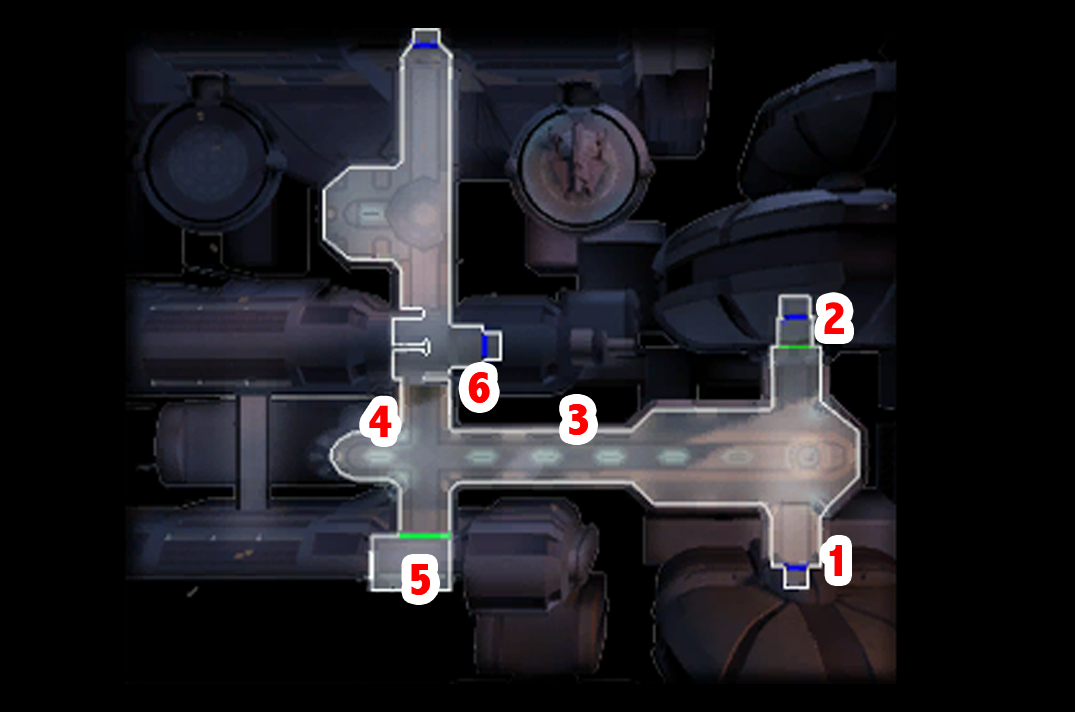
<style>
.page{position:relative;width:1075px;height:712px;background:#000000}
.page>*{position:absolute;margin:0}
.t1{font:48px "AbadiMT-CondensedExtraBold";color:#ff0000}
</style>
<div class="page">
<p class="t1" style="left:824px;top:302px;width:20px;height:32px">2</p>
<p class="t1" style="left:468px;top:372px;width:22px;height:31px">6</p>
<p class="t1" style="left:369px;top:405px;width:23px;height:32px">4</p>
<p class="t1" style="left:569px;top:404px;width:19px;height:31px">3</p>
<p class="t1" style="left:829px;top:545px;width:13px;height:31px">1</p>
<p class="t1" style="left:411px;top:564px;width:19px;height:31px">5</p>
</div>
